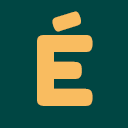
<style>
.page{position:relative;width:128px;height:128px;background:#004643}
.page>*{position:absolute;margin:0}
.t1{font:97px "FredokaOne-Regular";color:#f9bc60}
</style>
<div class="page">
<p class="t1" style="left:37px;top:11px;width:56px;height:95px">É</p>
</div>
